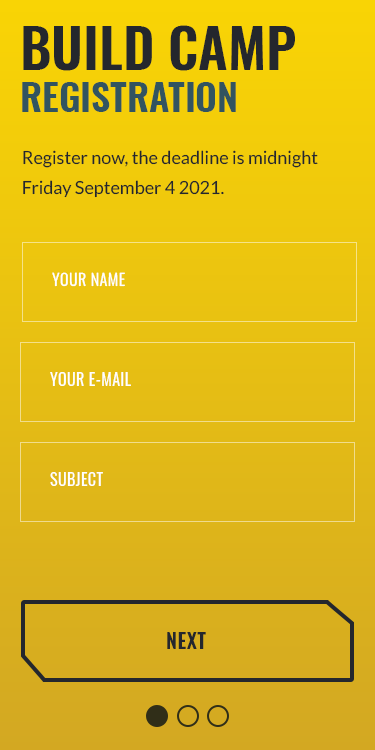
<style>
.page{position:relative;width:375px;height:750px}
.page>*{position:absolute;margin:0}
.t1{font:38px/42px "Oswald-SemiBold";color:#325460;text-transform:uppercase}
.t2{font:55px/42px "Oswald-SemiBold";color:#24272d;text-transform:uppercase}
.t3{font:18px/30px "Lato-Regular";color:#24272d}
.t4{font:16px "Oswald-Regular";letter-spacing:0.023em;color:#ffffff;text-transform:uppercase}
.t5{font:20px "Oswald-SemiBold";letter-spacing:0.023em;color:#24272d;text-transform:uppercase}
</style>
<div class="page">
<p class="t1" style="left:22px;top:25px;width:273px;height:87px"><span class="t2">BUild Camp<br></span>Registration</p>
<p class="t3" style="left:23px;top:150px;width:295px;height:48px">Register now, the deadline is midnight <br>Friday September 4 2021.</p>
<p class="t4" style="left:52px;top:272px;width:73px;height:15px">YOUr name</p>
<p class="t4" style="left:50px;top:372px;width:81px;height:14px">Your E-MAil</p>
<p class="t4" style="left:50px;top:472px;width:53px;height:14px">Subject</p>
<p class="t5" style="left:167px;top:632px;width:39px;height:17px">NEXT</p>
</div>
